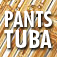
<style>
.page{position:relative;width:57px;height:57px;background:#ffffff}
.page>*{position:absolute;margin:0}
.t1{font:21.7px/23px "FuturaBT-BoldCondensed";letter-spacing:0.005em;color:#ffffff}
.t2{font:24.9px/21px "FuturaBT-BoldCondensed";letter-spacing:0.005em;color:#ffffff}
</style>
<div class="page">
<p class="t1" style="left:4px;top:11px;width:48px;height:37px;text-align:center">PANTS<br><span class="t2">TUBA</span></p>
</div>
